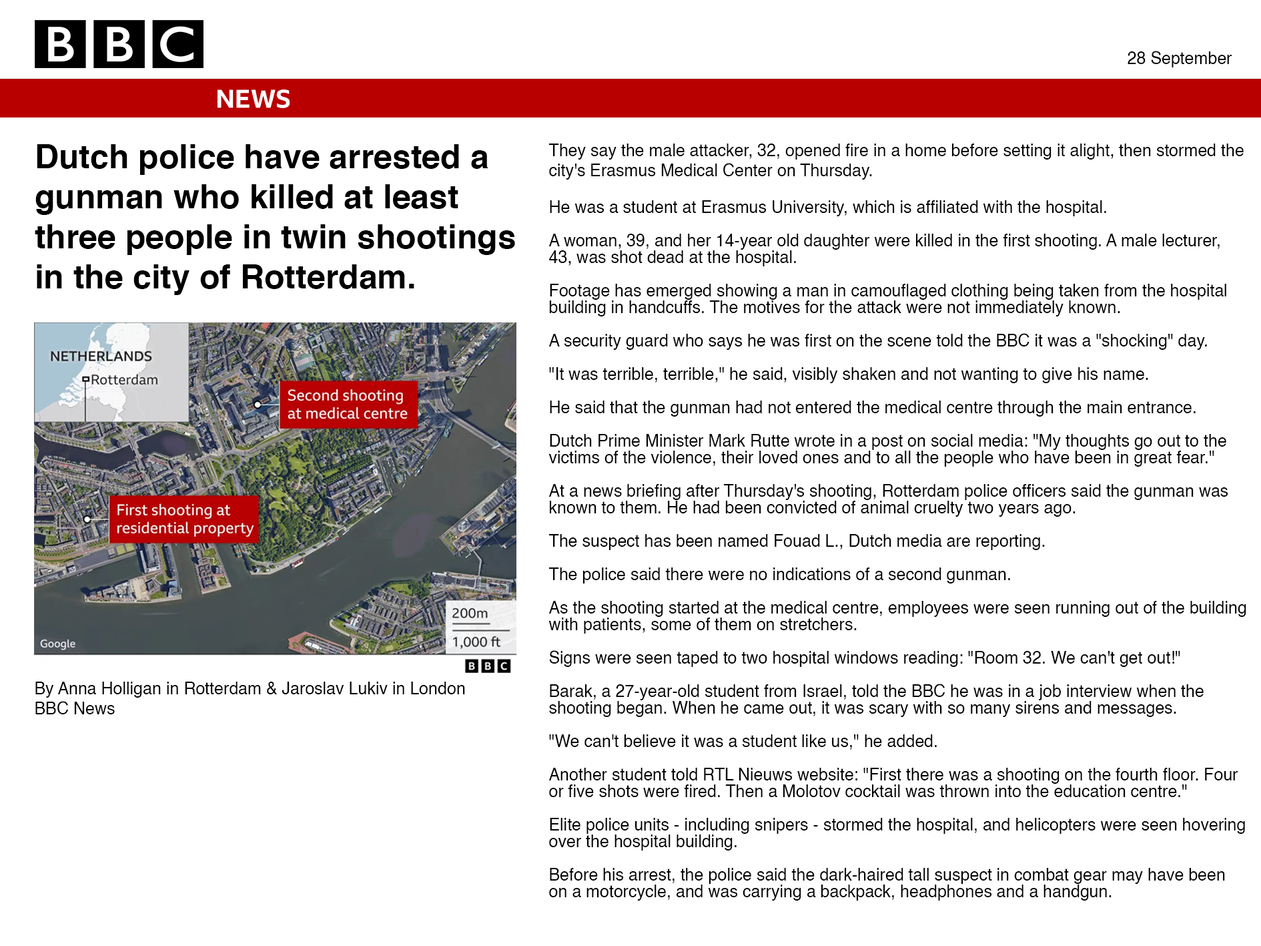
<style>
.page{position:relative;width:1261px;height:946px;background:#ffffff}
.page>*{position:absolute;margin:0}
.t1{font:16.7px "Helvetica";color:#000000}
.t2{font:33.4px "Helvetica-Bold";color:#000000}
.t3{font:33.4px/16.7px "Helvetica-Bold";color:#000000}
.t4{font:16.7px/16.7px "Helvetica";color:#000000}
</style>
<div class="page">
<p class="t1" style="left:1128px;top:51px;width:104px;height:16px">28 September</p>
<p class="t2" style="left:35px;top:144px;width:480px;height:151px">Dutch police have arrested a gunman who killed at least three people in twin shootings in the city of Rotterdam.<br><span class="t3">handgun.</span></p>
<p class="t4" style="left:548px;top:143px;width:698px;height:757px"><span class="t1">They say the male attacker, 32, opened fire in a home before setting it alight, then stormed the city's Erasmus Medical Center on Thursday.<br><br></span>He was a student at Erasmus University, which is affiliated with the hospital.<br><br>A woman, 39, and her 14-year old daughter were killed in the first shooting. A male lecturer, 43, was shot dead at the hospital.<br><br>Footage has emerged showing a man in camouflaged clothing being taken from the hospital building in handcuffs. The motives for the attack were not immediately known.<br><br>A security guard who says he was first on the scene told the BBC it was a "shocking" day.<br><br>"It was terrible, terrible," he said, visibly shaken and not wanting to give his name.<br><br>He said that the gunman had not entered the medical centre through the main entrance.<br><br>Dutch Prime Minister Mark Rutte wrote in a post on social media: "My thoughts go out to the victims of the violence, their loved ones and to all the people who have been in great fear."<br><br>At a news briefing after Thursday's shooting, Rotterdam police officers said the gunman was known to them. He had been convicted of animal cruelty two years ago.<br><br>The suspect has been named Fouad L., Dutch media are reporting.<br><br>The police said there were no indications of a second gunman.<br><br>As the shooting started at the medical centre, employees were seen running out of the building with patients, some of them on stretchers.<br><br>Signs were seen taped to two hospital windows reading: "Room 32. We can't get out!"<br><br>Barak, a 27-year-old student from Israel, told the BBC he was in a job interview when the shooting began. When he came out, it was scary with so many sirens and messages.<br><br>"We can't believe it was a student like us," he added.<br><br>Another student told RTL Nieuws website: "First there was a shooting on the fourth floor. Four or five shots were fired. Then a Molotov cocktail was thrown into the education centre."<br><br>Elite police units - including snipers - stormed the hospital, and helicopters were seen hovering over the hospital building.<br><br>Before his arrest, the police said the dark-haired tall suspect in combat gear may have been on a motorcycle, and was carrying a backpack, headphones and a handgun.</p>
<p class="t1" style="left:35px;top:681px;width:430px;height:33px">By Anna Holligan in Rotterdam &amp; Jaroslav Lukiv in London<br>BBC News</p>
</div>
